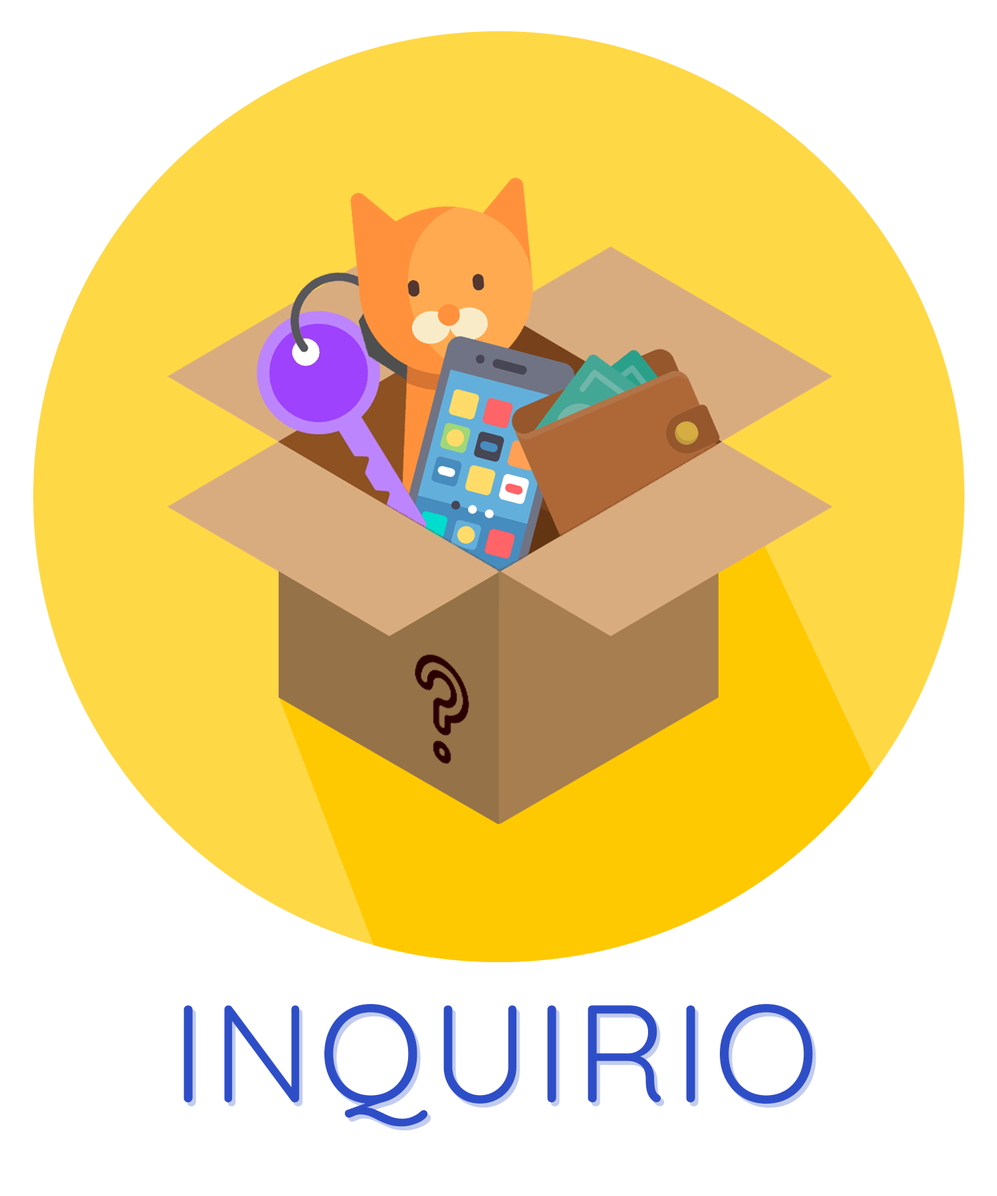
<style>
.page{position:relative;width:997px;height:1196px;background:#ffffff}
.page>*{position:absolute;margin:0}
.t1{font:138.5px "Quicksand-Regular";letter-spacing:0.04em;color:#2e4ec8;text-transform:uppercase}
</style>
<div class="page">
<p class="t1" style="left:183px;top:1004px;width:630px;height:123px">inquirio</p>
</div>
